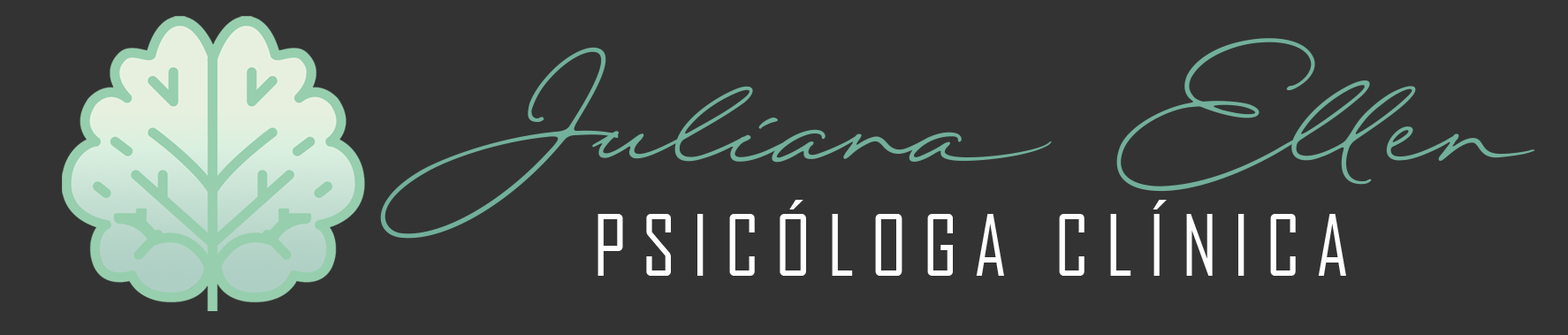
<style>
.page{position:relative;width:1568px;height:335px;background:#333333}
.page>*{position:absolute;margin:0}
.t1{font:383px "QuickSignaturePersonalUse";color:#72b09b}
.t2{font:81px "AgencyFB-Reg";letter-spacing:0.2em;color:#ffffff}
</style>
<div class="page">
<p class="t1" style="left:380px;top:38px;width:1155px;height:201px">Juliana Ellen</p>
<p class="t2" style="left:598px;top:200px;width:748px;height:76px">PSICÓLOGA CLÍNICA</p>
</div>
